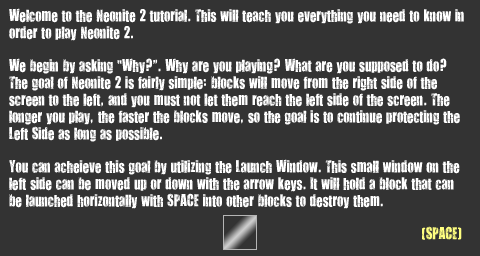
<style>
.page{position:relative;width:480px;height:256px;background:#333333}
.page>*{position:absolute;margin:0}
.t1{font:14px "YouAreLoved";color:#ffffff}
.t2{font:14px "YouAreLoved";color:#ffff80}
</style>
<div class="page">
<p class="t1" style="left:9px;top:8px;width:455px;height:232px">Welcome to the Neonite 2 tutorial. This will teach you everything you need to know in<br>order to play Neonite 2.<br><br>We begin by asking “Why?”. Why are you playing? What are you supposed to do?<br>The goal of Neonite 2 is fairly simple: blocks will move from the right side of the<br>screen to the left, and you must not let them reach the left side of the screen. The<br>longer you play, the faster the blocks move, so the goal is to continue protecting the<br>Left Side as long as possible.<br><br>You can acheieve this goal by utilizing the Launch Window. This small window on the<br>left side can be moved up or down with the arrow keys. It will hold a block that can<br>be launched horizontally with SPACE into other blocks to destroy them.<br><br><span class="t2">                                                                                                          (SPACE)</span></p>
</div>
